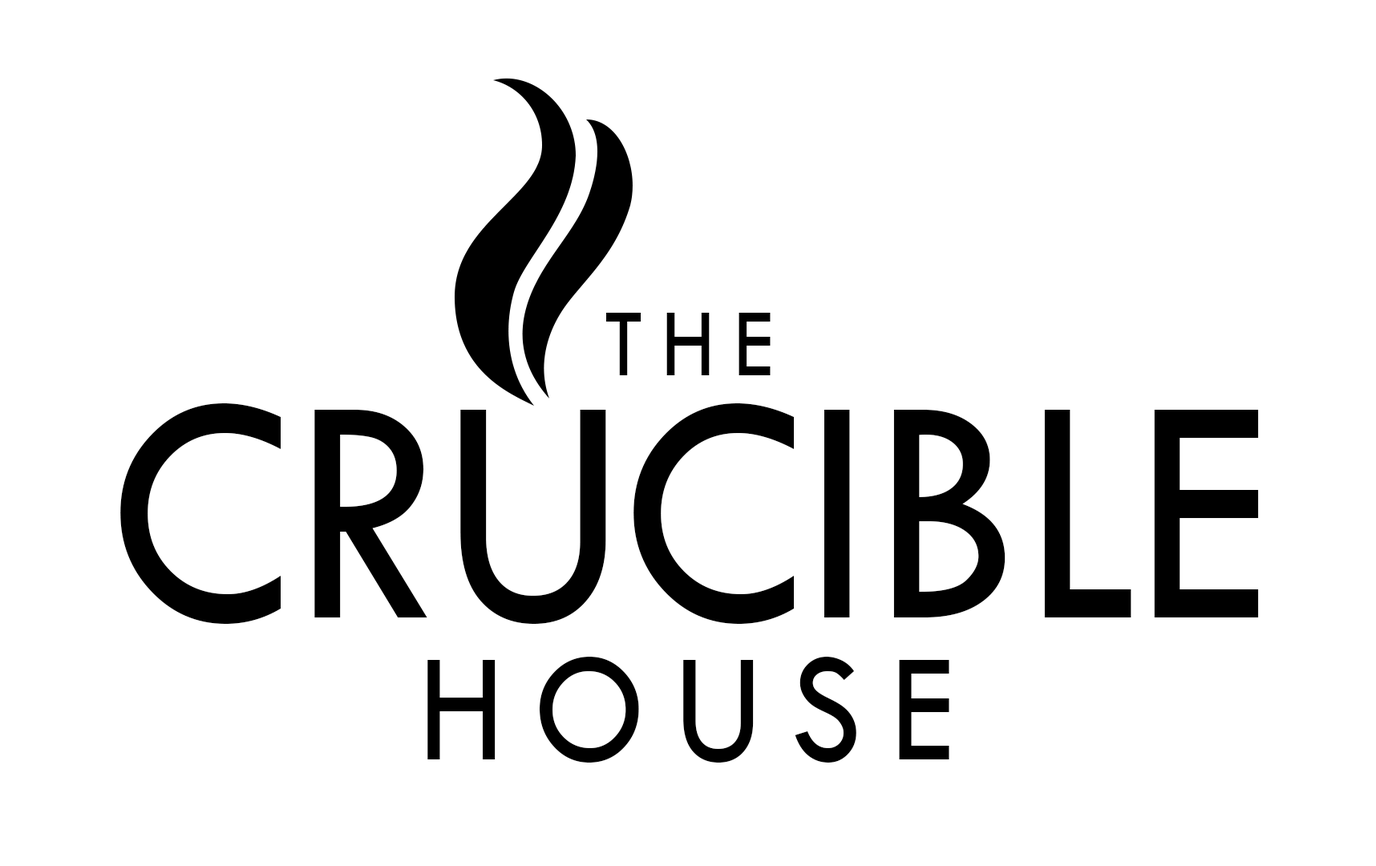
<style>
.page{position:relative;width:1376px;height:866px;background:#ffffff}
.page>*{position:absolute;margin:0}
.t1{font:100.3px "TwCenMT-Regular";letter-spacing:0.2em;color:#000000;text-transform:uppercase;scale:0.9 1}
.t2{font:334.2px "TwCenMT-Regular";color:#000000;text-transform:uppercase;scale:0.9 1}
.t3{font:160.4px "TwCenMT-Regular";letter-spacing:0.2em;color:#000000;text-transform:uppercase;scale:0.9 1}
</style>
<div class="page">
<p class="t1" style="left:606px;top:313px;width:165px;height:62px">the</p>
<p class="t2" style="left:120px;top:403px;width:1139px;height:221px">crUcible</p>
<p class="t3" style="left:428px;top:657px;width:522px;height:106px">house</p>
</div>
